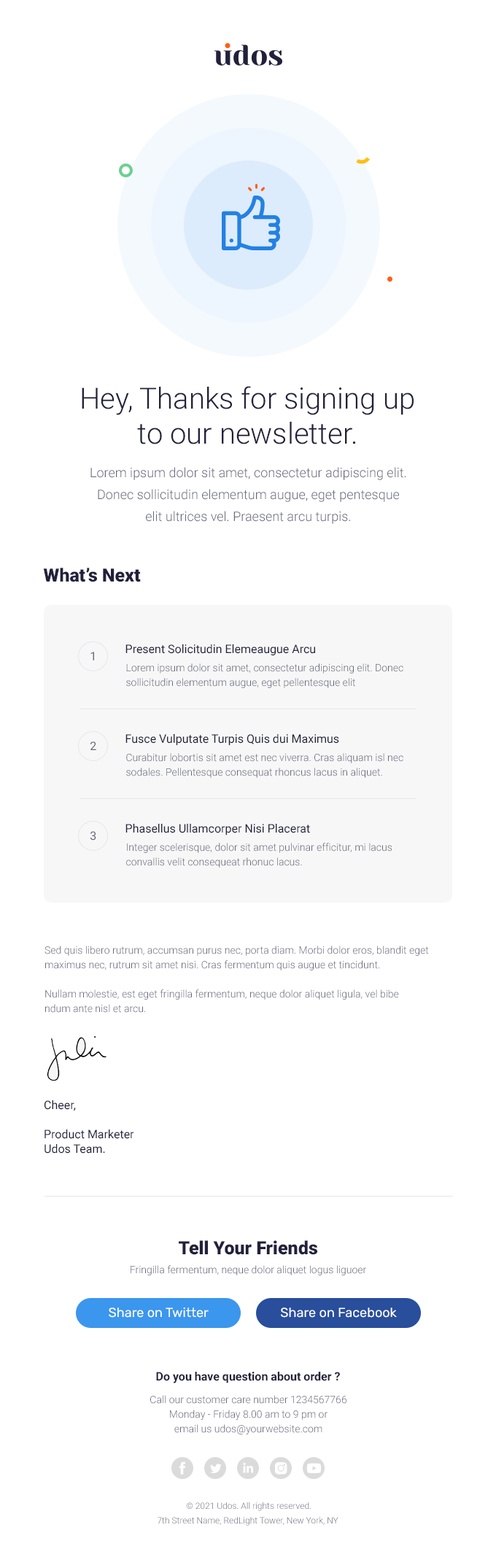
<style>
.page{position:relative;width:496px;height:1568px;background:#ffffff}
.page>*{position:absolute;margin:0}
.t1{font:29.2px "Roboto-Light";color:#21213b}
.t2{font:13.1px/21.9px "Roboto-Light";color:#66667e}
.t3{font:18.2px "Roboto-Black";color:#21213b}
.t4{font:11.7px "Roboto-Regular";color:#66667e}
.t5{font:11.7px "Roboto-Regular";color:#21213b}
.t6{font:10.2px/14.6px "Roboto-Light";color:#66667e}
.t7{font:11.7px/14.6px "Roboto-Regular";color:#21213b}
.t8{font:10.2px "Roboto-Light";color:#66667e}
.t9{font:13.1px "Rubik-Regular";color:#ffffff}
.t10{font:11.7px "Roboto-Bold";color:#21213b}
.t11{font:8.8px/14.6px "Roboto-Light";color:#66667e}
</style>
<div class="page">
<p class="t1" style="left:82px;top:386px;width:332px;height:58px;text-align:center">Hey, Thanks for signing up<br>to our newsletter.</p>
<p class="t2" style="left:90px;top:467px;width:316px;height:57px;text-align:center">Lorem ipsum dolor sit amet, consectetur adipiscing elit. Donec sollicitudin elementum augue, eget pentesque<br>elit ultrices vel. Praesent arcu turpis.</p>
<p class="t3" style="left:43px;top:568px;width:98px;height:14px">What’s Next</p>
<p class="t4" style="left:90px;top:652px;width:4px;height:8px">1</p>
<p class="t5" style="left:125px;top:644px;width:190px;height:12px">Present Solicitudin Elemeaugue Arcu</p>
<p class="t6" style="left:126px;top:663px;width:277px;height:25px">Lorem ipsum dolor sit amet, consectetur adipiscing elit. Donec sollicitudin elementum augue, eget pellentesque elit</p>
<p class="t5" style="left:125px;top:734px;width:214px;height:12px">Fusce Vulputate Turpis Quis dui Maximus</p>
<p class="t4" style="left:90px;top:741px;width:6px;height:9px">2</p>
<p class="t6" style="left:126px;top:753px;width:277px;height:25px">Curabitur lobortis sit amet est nec viverra. Cras aliquam isl nec sodales. Pellentesque consequat rhoncus lacus in aliquet.</p>
<p class="t4" style="left:90px;top:831px;width:6px;height:10px">3</p>
<p class="t5" style="left:125px;top:824px;width:185px;height:11px">Phasellus Ullamcorper Nisi Placerat</p>
<p class="t6" style="left:126px;top:843px;width:266px;height:25px">Integer scelerisque, dolor sit amet pulvinar efficitur, mi lacus<br>convallis velit consequeat rhonuc lacus.</p>
<p class="t6" style="left:45px;top:946px;width:384px;height:67px">Sed quis libero rutrum, accumsan purus nec, porta diam. Morbi dolor eros, blandit eget maximus nec, rutrum sit amet nisi. Cras fermentum quis augue et tincidunt.<br><br>Nullam molestie, est eget fringilla fermentum, neque dolor aliquet ligula, vel bibe<br>ndum ante nisl et arcu.</p>
<p class="t7" style="left:45px;top:1100px;width:89px;height:54px">Cheer,<br><br>Product Marketer<br>Udos Team.</p>
<p class="t3" style="left:179px;top:1240px;width:138px;height:15px">Tell Your Friends</p>
<p class="t8" style="left:131px;top:1265px;width:235px;height:10px">Fringilla fermentum, neque dolor aliquet logus liguoer</p>
<p class="t9" style="left:109px;top:1308px;width:100px;height:10px">Share on Twitter</p>
<p class="t9" style="left:281px;top:1308px;width:116px;height:10px">Share on Facebook</p>
<p class="t10" style="left:156px;top:1372px;width:184px;height:11px">Do you have question about order ?</p>
<p class="t6" style="left:150px;top:1395px;width:197px;height:39px;text-align:center">Call our customer care number 1234567766<br>Monday - Friday 8.00 am to 9 pm or <br>email us udos@yourwebsite.com</p>
<p class="t11" style="left:158px;top:1502px;width:181px;height:24px;text-align:center">© 2021 Udos. All rights reserved.<br>7th Street Name, RedLight Tower, New York, NY</p>
</div>
